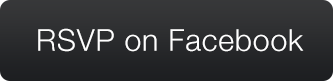
<style>
.page{position:relative;width:333px;height:81px}
.page>*{position:absolute;margin:0}
.t1{font:30px "HelveticaNeue-Light";letter-spacing:0.03em;color:#ffffff}
</style>
<div class="page">
<p class="t1" style="left:38px;top:28px;width:266px;height:24px">RSVP on Facebook</p>
</div>
